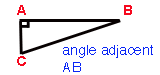
<style>
.page{position:relative;width:160px;height:75px;background:#ffffff}
.page>*{position:absolute;margin:0}
.t1{font:14px "Helvetica-Bold";color:#f6091f}
.t2{font:14px "Helvetica";color:#0925f6}
</style>
<div class="page">
<p class="t1" style="left:17px;top:5px;width:115px;height:61px">A                         B<br><br><br>C</p>
<p class="t2" style="left:63px;top:45px;width:90px;height:27px">angle adjacent<br>AB</p>
</div>
